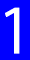
<style>
.page{position:relative;width:30px;height:60px;background:#0000ff}
.page>*{position:absolute;margin:0}
.t1{font:60.7px "KozGoPr6N-Regular";color:#ffffff}
</style>
<div class="page">
<p class="t1" style="left:5px;top:7px;width:15px;height:47px">1</p>
</div>
